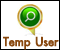
<style>
.page{position:relative;width:60px;height:50px;background:#ffffff}
.page>*{position:absolute;margin:0}
.t1{font:17px "PSLxKittithada-Bold";color:#88470e;font-weight:bold}
</style>
<div class="page">
<p class="t1" style="left:3px;top:36px;width:56px;height:14px">Temp User</p>
</div>
